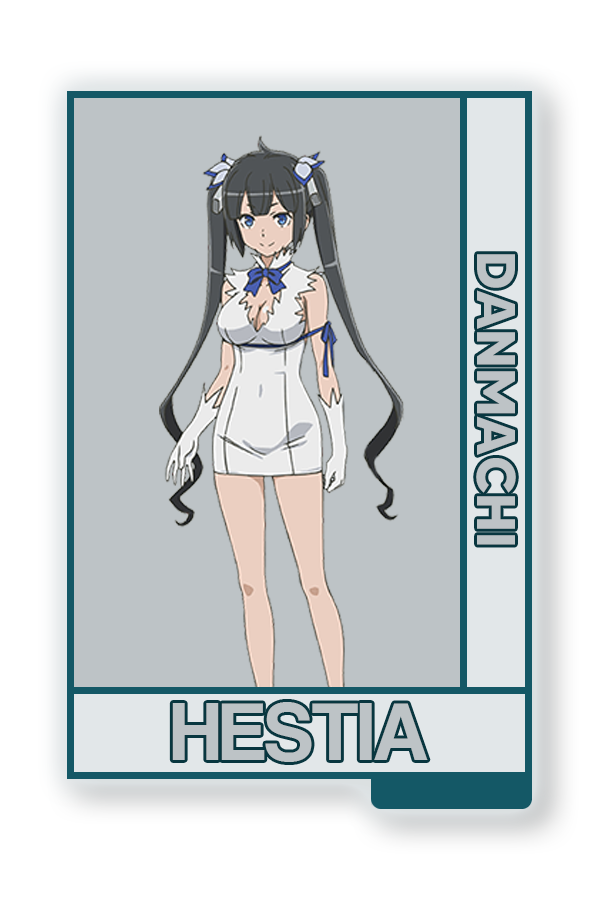
<style>
.page{position:relative;width:600px;height:900px;background:#bdc3c6}
.page>*{position:absolute;margin:0}
.t1{font:54.4px "MADETOMMY-Bold";color:#bdc3c6}
.t2{font:83.7px "CoolveticaRg-Regular";color:#bdc3c6}
</style>
<div class="page">
<p class="t1" style="left:476px;top:254px;width:40px;height:291px;rotate:90deg">DANMACHI</p>
<p class="t2" style="left:172px;top:702px;width:256px;height:60px">HESTIA</p>
</div>
